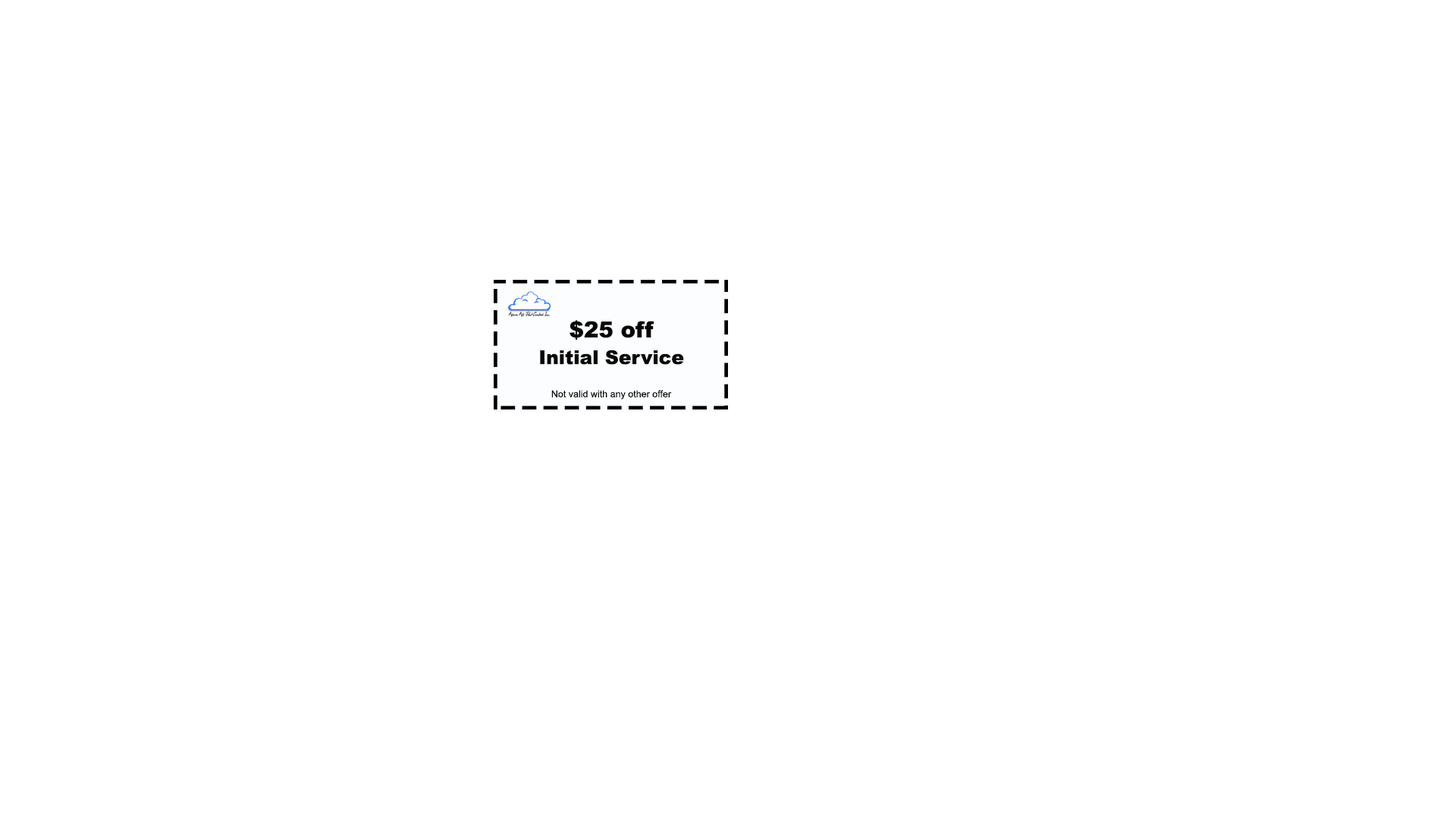
<style>
.page{position:relative;width:1456px;height:819px;background:#ffffff}
.page>*{position:absolute;margin:0}
.t1{font:22.1px "Arial-Black";color:#060606}
.t2{font:19px "Arial-Black";color:#060606}
.t3{font:9.5px "ArialMT";color:#060606}
</style>
<div class="page">
<p class="t1" style="left:570px;top:320px;width:84px;height:20px">$25 off</p>
<p class="t2" style="left:540px;top:350px;width:144px;height:15px">Initial Service</p>
<p class="t3" style="left:551px;top:390px;width:121px;height:10px">Not valid with any other offer</p>
</div>
